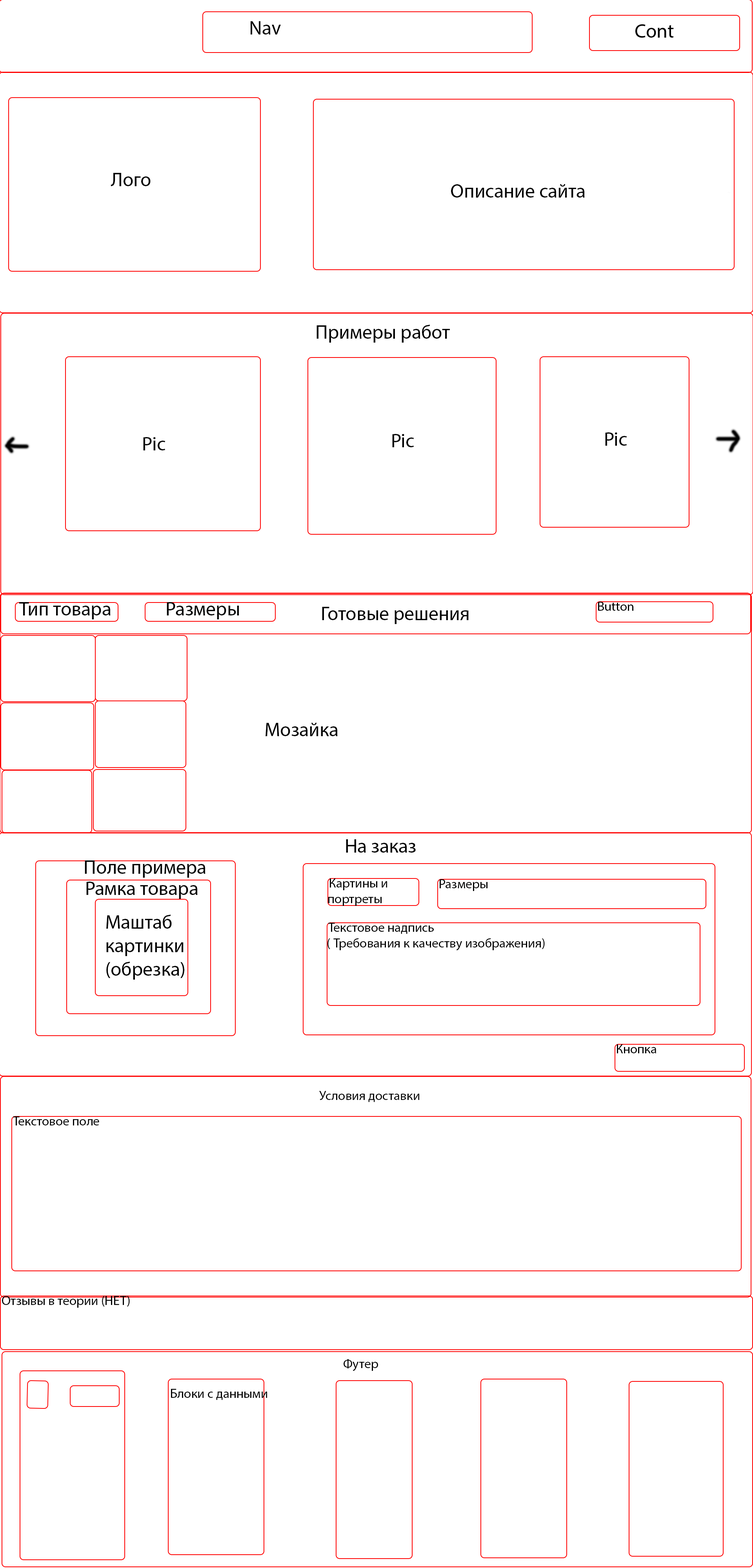
<style>
.page{position:relative;width:753px;height:1568px;background:#ffffff}
.page>*{position:absolute;margin:0}
.t1{font:19.6px "MyriadPro-Regular";color:#000000}
.t2{font:13.1px "MyriadPro-Regular";color:#000000}
</style>
<div class="page">
<p class="t1" style="left:250px;top:21px;width:31px;height:13px">Nav</p>
<p class="t1" style="left:111px;top:173px;width:40px;height:13px">Лого</p>
<p class="t1" style="left:451px;top:184px;width:133px;height:14px">Описание сайта</p>
<p class="t1" style="left:316px;top:325px;width:134px;height:18px">Примеры работ</p>
<p class="t1" style="left:143px;top:437px;width:22px;height:13px">Pic</p>
<p class="t1" style="left:392px;top:434px;width:22px;height:13px">Pic</p>
<p class="t1" style="left:605px;top:432px;width:21px;height:14px">Pic</p>
<p class="t1" style="left:19px;top:602px;width:92px;height:17px">Тип товара</p>
<p class="t1" style="left:167px;top:602px;width:72px;height:17px">Размеры</p>
<p class="t2" style="left:598px;top:602px;width:35px;height:9px">Button</p>
<p class="t1" style="left:322px;top:607px;width:146px;height:17px">Готовые решения</p>
<p class="t1" style="left:265px;top:722px;width:73px;height:14px">Мозайка</p>
<p class="t1" style="left:346px;top:839px;width:70px;height:14px">На заказ</p>
<p class="t1" style="left:85px;top:860px;width:120px;height:18px">Поле примера</p>
<p class="t1" style="left:86px;top:882px;width:112px;height:17px">Рамка товара</p>
<p class="t2" style="left:328px;top:878px;width:59px;height:28px">Картины и портреты</p>
<p class="t2" style="left:439px;top:879px;width:48px;height:12px">Размеры</p>
<p class="t1" style="left:106px;top:915px;width:78px;height:65px">Маштаб <br>картинки<br>(обрезка)</p>
<p class="t2" style="left:327px;top:923px;width:217px;height:28px">Текстовое надпись <br>( Требования к качеству изображения)</p>
<p class="t2" style="left:617px;top:1044px;width:39px;height:9px">Кнопка</p>
<p class="t2" style="left:319px;top:1091px;width:100px;height:11px">Условия доставки</p>
<p class="t2" style="left:13px;top:1116px;width:86px;height:9px">Текстовое поле</p>
<p class="t2" style="left:2px;top:1296px;width:128px;height:12px">Отзывы в теории (НЕТ)</p>
<p class="t2" style="left:343px;top:1359px;width:35px;height:12px">Футер</p>
<p class="t2" style="left:171px;top:1389px;width:96px;height:11px">Блоки с данными</p>
</div>
